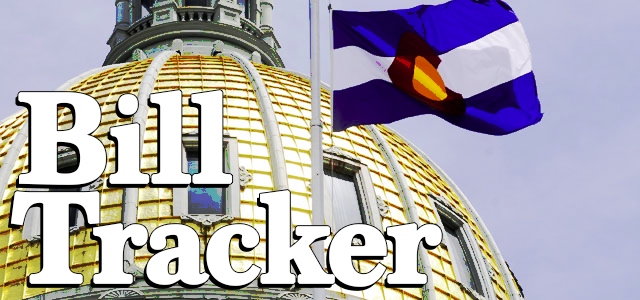
<style>
.page{position:relative;width:640px;height:300px}
.page>*{position:absolute;margin:0}
.t1{font:132px/100px "Marion-Bold";letter-spacing:-0.05em;color:#ffffff;font-weight:bold}
</style>
<div class="page">
<p class="t1" style="left:10px;top:90px;width:432px;height:197px">Bill<br>Tracker</p>
</div>
